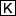
<style>
.page{position:relative;width:16px;height:16px;background:#ffffff}
.page>*{position:absolute;margin:0}
.t1{font:14px "ArialMT";color:#000000}
</style>
<div class="page">
<p class="t1" style="left:3px;top:3px;width:10px;height:10px">K</p>
</div>
